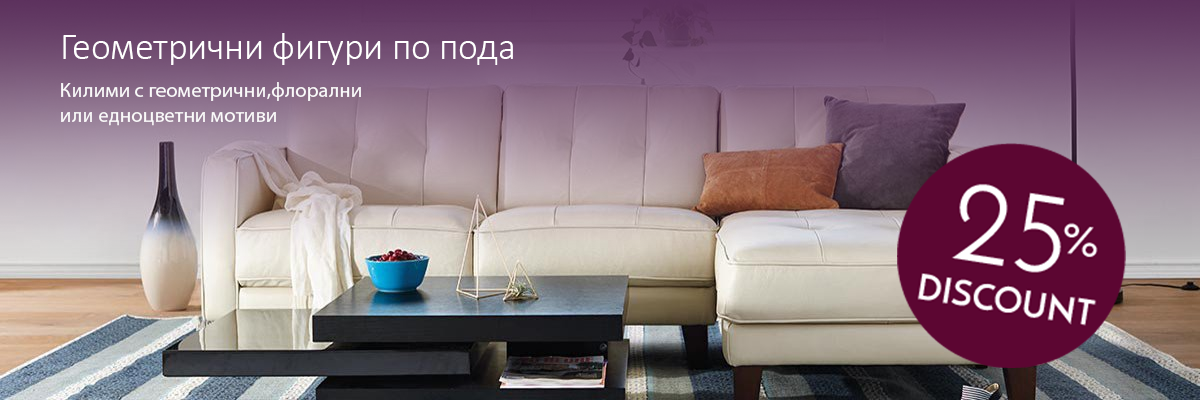
<style>
.page{position:relative;width:1200px;height:400px}
.page>*{position:absolute;margin:0}
.t1{font:37.5px "Calibri-Light";color:#ffffff}
.t2{font:20.9px "MyriadPro-Regular";color:#fafafa}
</style>
<div class="page">
<p class="t1" style="left:63px;top:33px;width:450px;height:32px">Геометрични фигури по пода</p>
<p class="t2" style="left:61px;top:82px;width:300px;height:44px">Килими с геометрични,флорални или едноцветни мотиви</p>
</div>
